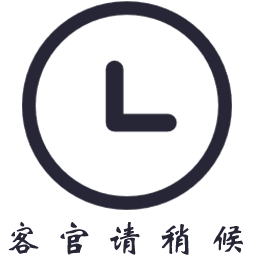
<style>
.page{position:relative;width:255px;height:255px;background:#ffffff}
.page>*{position:absolute;margin:0}
.t1{font:37.5px "STXinwei";letter-spacing:0.38em;color:#272636}
</style>
<div class="page">
<p class="t1" style="left:8px;top:221px;width:235px;height:34px">客官请稍候</p>
</div>
